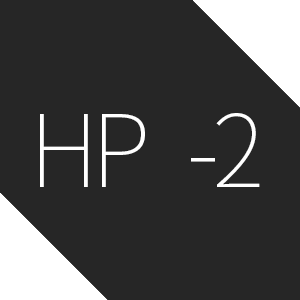
<style>
.page{position:relative;width:300px;height:300px;background:#262626}
.page>*{position:absolute;margin:0}
.t1{font:100px "NotoSansCJKkr-Thin";letter-spacing:-0.075em;color:#ffffff}
</style>
<div class="page">
<p class="t1" style="left:40px;top:113px;width:220px;height:74px">HP   -2</p>
</div>
